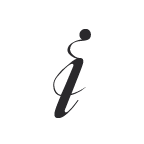
<style>
.page{position:relative;width:144px;height:144px;background:#ffffff}
.page>*{position:absolute;margin:0}
.t1{font:140px "MutluOrnamental";color:#2a292c}
</style>
<div class="page">
<p class="t1" style="left:53px;top:29px;width:38px;height:89px">i</p>
</div>
